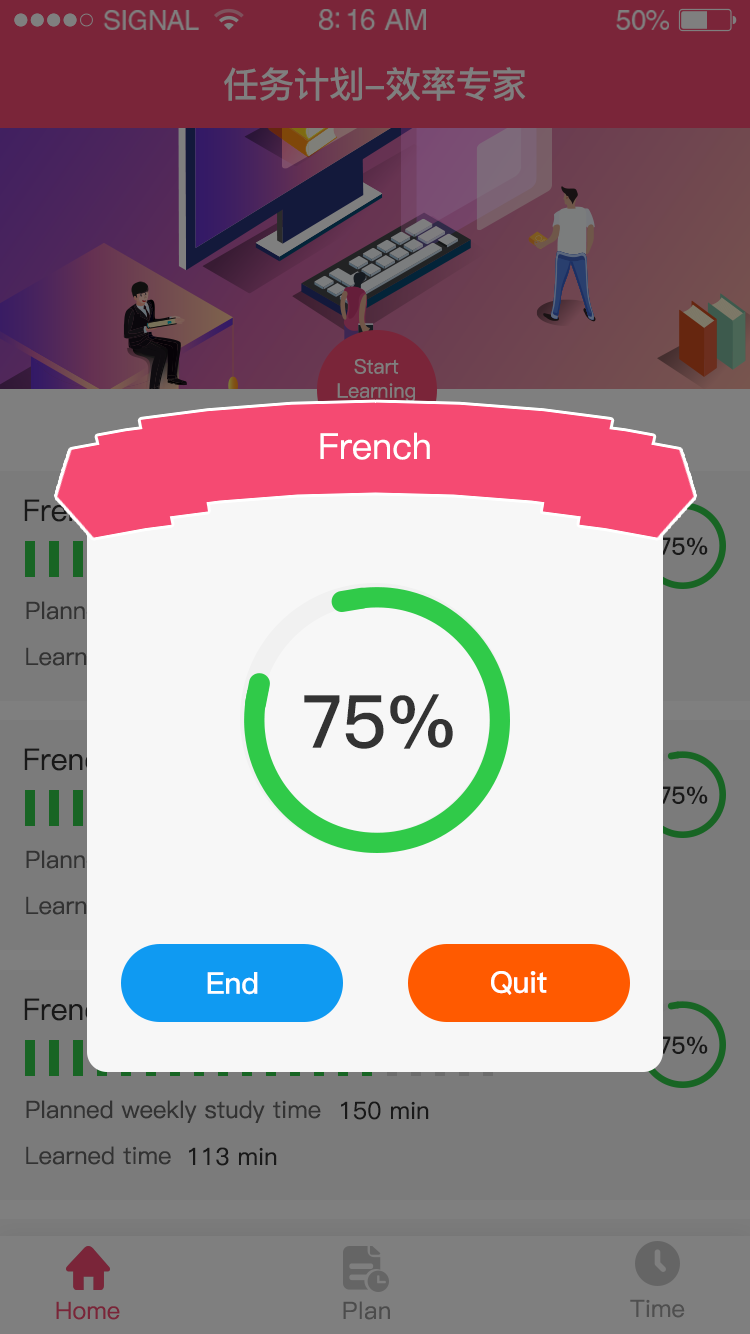
<style>
.page{position:relative;width:750px;height:1334px;background:#f7f7f7}
.page>*{position:absolute;margin:0}
.t1{font:26.9px "HelveticaLTStd-Roman";letter-spacing:-0.02em;color:#7f7f7f}
.t2{font:29.3px "HelveticaLTStd-Roman";letter-spacing:-0.02em;color:#7f7f7f}
.t3{font:28.1px "HelveticaLTStd-Roman";letter-spacing:-0.02em;color:#7f7f7f}
.t4{font:36px "PingFang-SC-Bold";letter-spacing:-0.02em;color:#7f7f7f}
.t5{font:19.9px/24.1px "PingFang-SC-Medium";color:#7f7f7f}
.t6{font:36px "PingFang-SC-Medium";color:#ffffff}
.t7{font:30px "PingFang-SC-Medium"}
.t8{font:24px "PingFang-SC-Bold";letter-spacing:-0.02em;color:#191919;text-transform:uppercase}
.t9{font:73.6px "PingFang-SC-Bold";letter-spacing:-0.02em;color:#333333;text-transform:uppercase}
.t10{font:30px "PingFang-SC-Bold";letter-spacing:-0.02em;color:#ffffff}
.t11{font:24px "PingFang-SC-Medium";color:#333333}
.t12{font:24px "PingFang-SC-Medium";color:#191919}
.t13{font:24px "PingFang-SC-Medium";color:#7a2539}
.t14{font:24px "PingFang-SC-Medium";letter-spacing:0.02em;color:#4c4c4c}
.t15{font:24px "PingFang-SC-Medium";color:#4f4f4f}
</style>
<div class="page">
<p class="t1" style="left:103px;top:10px;width:96px;height:20px">SIGNAL</p>
<p class="t2" style="left:319px;top:9px;width:107px;height:21px">8:16 AM</p>
<p class="t3" style="left:616px;top:10px;width:53px;height:20px">50%</p>
<p class="t4" style="left:224px;top:67px;width:302px;height:34px">任务计划-效率专家</p>
<p class="t5" style="left:337px;top:358px;width:78px;height:44px;text-align:center">Start<br>Learning</p>
<p class="t6" style="left:320px;top:432px;width:110px;height:28px">French</p>
<p class="t7" style="left:24px;top:499px;width:92px;height:23px">French</p>
<p class="t8" style="left:659px;top:537px;width:49px;height:18px">75%</p>
<p class="t9" style="left:304px;top:694px;width:149px;height:55px">75%</p>
<p class="t8" style="left:659px;top:786px;width:49px;height:18px">75%</p>
<p class="t10" style="left:207px;top:972px;width:51px;height:23px">End</p>
<p class="t10" style="left:491px;top:971px;width:56px;height:24px">Quit</p>
<p class="t8" style="left:659px;top:1036px;width:49px;height:18px">75%</p>
<p class="t11" style="left:26px;top:1100px;width:295px;height:23px">Planned weekly study time</p>
<p class="t12" style="left:341px;top:1101px;width:88px;height:19px">150 min</p>
<p class="t11" style="left:26px;top:1146px;width:145px;height:19px">Learned time</p>
<p class="t12" style="left:189px;top:1147px;width:88px;height:19px">113 min</p>
<p class="t13" style="left:56px;top:1301px;width:64px;height:19px">Home</p>
<p class="t14" style="left:343px;top:1301px;width:47px;height:19px">Plan</p>
<p class="t15" style="left:630px;top:1299px;width:55px;height:19px">Time</p>
</div>
